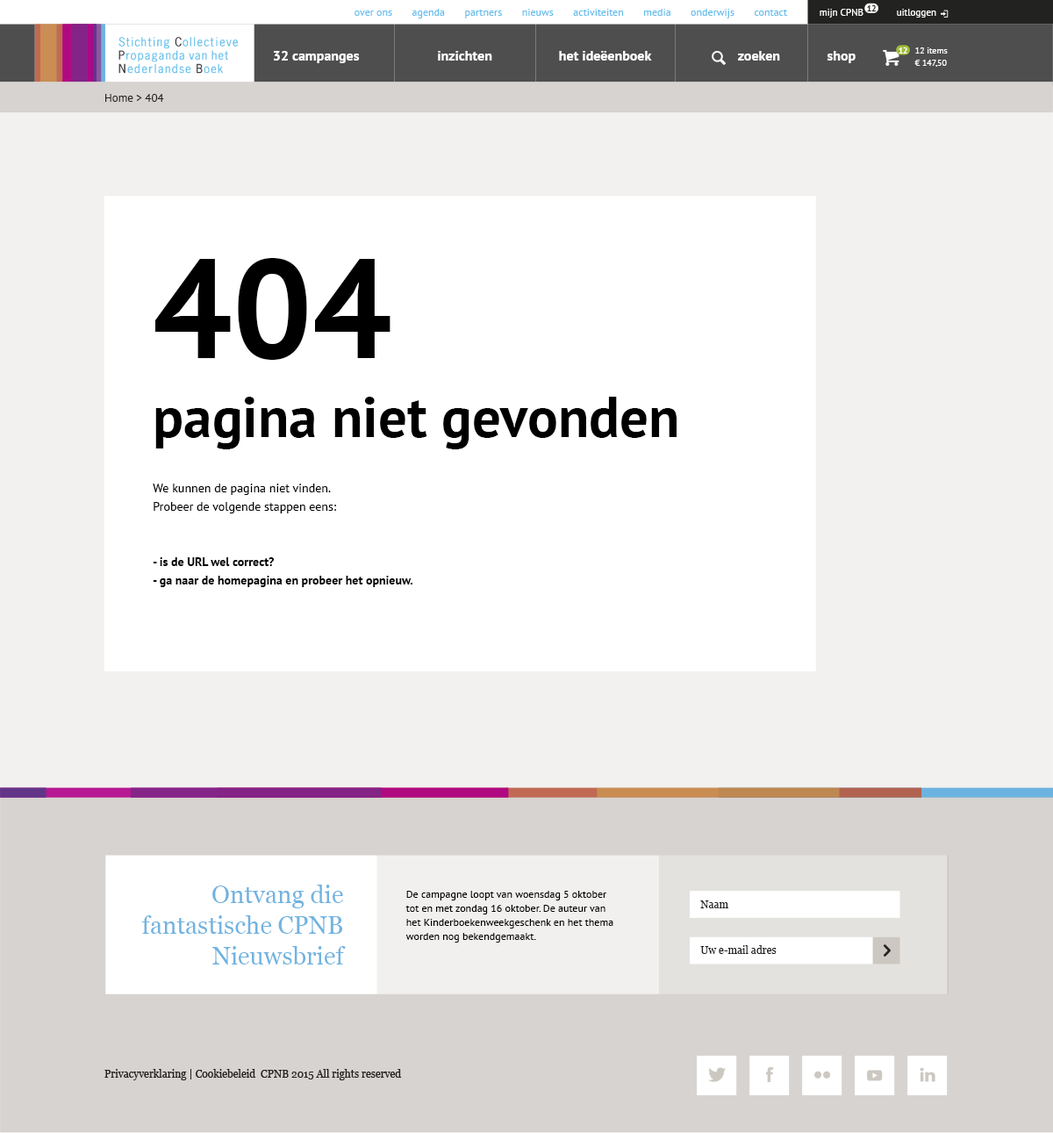
<style>
.page{position:relative;width:1053px;height:1133px;background:#ffffff}
.page>*{position:absolute;margin:0}
.t1{font:8.8px "PTSans-Bold";letter-spacing:-0.05em;color:#222221}
.t2{font:10.5px "PTSans-Regular";color:#65bdec}
.t3{font:9.7px "PTSans-Regular";color:#ffffff}
.t4{font:14px "PTSans-Bold";color:#ffffff}
.t5{font:8.8px "PTSans-Bold";letter-spacing:-0.05em;color:#ffffff}
.t6{font:8.8px/12.3px "PTSans-Regular";color:#ffffff}
.t7{font:11.4px "PTSans-Regular";color:#222221}
.t8{font:12.3px/18.4px "PTSans-Bold";color:#000000}
.t9{font:140.4px/127.2px "PTSans-Bold";color:#000000}
.t10{font:57px/79px "PTSans-Bold";color:#000000}
.t11{font:12.3px/18.4px "PTSans-Regular";color:#000000}
.t12{font:24.6px/30.7px "Georgia";color:#5daadc}
.t13{font:10.5px/14px "PTSans-Regular";color:#000000}
.t14{font:10.5px "Georgia";color:#222221}
</style>
<div class="page">
<p class="t1" style="left:867px;top:5px;width:9px;height:6px">12</p>
<p class="t2" style="left:354px;top:9px;width:434px;height:9px">over ons       agenda       partners       nieuws       activiteiten       media       onderwijs       contact</p>
<p class="t3" style="left:819px;top:9px;width:44px;height:9px">mijn CPNB</p>
<p class="t3" style="left:897px;top:9px;width:39px;height:9px">uitloggen</p>
<p class="t4" style="left:274px;top:51px;width:86px;height:12px">32 campanges</p>
<p class="t4" style="left:438px;top:51px;width:54px;height:10px">inzichten</p>
<p class="t4" style="left:559px;top:51px;width:93px;height:10px">het ideëenboek</p>
<p class="t4" style="left:738px;top:51px;width:42px;height:10px">zoeken</p>
<p class="t4" style="left:826px;top:51px;width:29px;height:12px">shop</p>
<p class="t5" style="left:898px;top:47px;width:9px;height:7px">12</p>
<p class="t6" style="left:914px;top:47px;width:34px;height:20px">12 items<br>€ 147,50</p>
<p class="t7" style="left:105px;top:94px;width:59px;height:8px">Home &gt; 404</p>
<p class="t8" style="left:153px;top:258px;width:523px;height:329px"><span class="t9">404 <br></span><span class="t10">pagina niet gevonden<br></span><span class="t11"><br><br>We kunnen de pagina niet vinden.<br>Probeer de volgende stappen eens:<br><br><br></span>- is de URL wel correct?<br>- ga naar de homepagina en probeer het opnieuw.</p>
<p class="t12" style="left:141px;top:884px;width:205px;height:80px;text-align:right;opacity:0.9">Ontvang die<br>fantastische CPNB<br>Nieuwsbrief</p>
<p class="t13" style="left:405px;top:890px;width:208px;height:52px">De campagne loopt van woensdag 5 oktober tot en met zondag 16 oktober. De auteur van het Kinderboekenweekgeschenk en het thema worden nog bekendgemaakt.</p>
<p class="t14" style="left:700px;top:900px;width:28px;height:8px">Naam</p>
<p class="t14" style="left:700px;top:945px;width:76px;height:9px">Uw e-mail adres</p>
<p class="t14" style="left:104px;top:1069px;width:298px;height:11px">Privacyverklaring | Cookiebeleid  CPNB 2015 All rights reserved</p>
</div>
